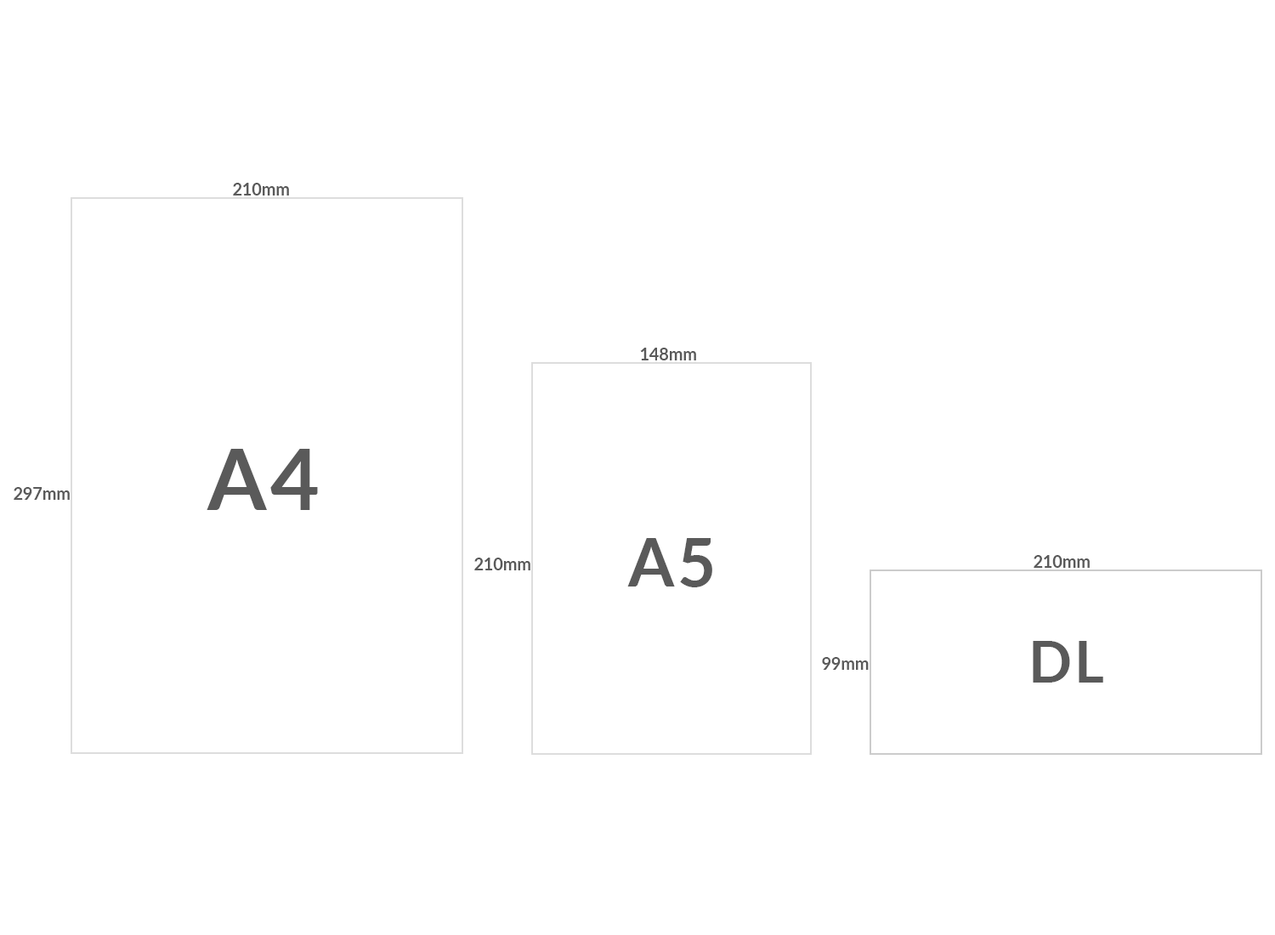
<style>
.page{position:relative;width:1275px;height:935px;background:#ffffff}
.page>*{position:absolute;margin:0}
.t1{font:17px "Lato-Bold";letter-spacing:-0.01em;color:#5a5a5a}
.t2{font:85.3px "Lato-Bold";letter-spacing:0.05em;color:#5a5a5a}
.t3{font:66.3px "Lato-Bold";letter-spacing:0.05em;color:#5a5a5a}
.t4{font:56.8px "Lato-Bold";letter-spacing:0.05em;color:#5a5a5a}
</style>
<div class="page">
<p class="t1" style="left:233px;top:183px;width:56px;height:13px">210mm</p>
<p class="t1" style="left:640px;top:348px;width:56px;height:12px">148mm</p>
<p class="t2" style="left:207px;top:449px;width:111px;height:61px">A4</p>
<p class="t1" style="left:14px;top:487px;width:56px;height:13px">297mm</p>
<p class="t3" style="left:627px;top:538px;width:85px;height:49px">A5</p>
<p class="t1" style="left:474px;top:558px;width:56px;height:12px">210mm</p>
<p class="t1" style="left:1034px;top:555px;width:56px;height:13px">210mm</p>
<p class="t4" style="left:1033px;top:641px;width:70px;height:42px">DL</p>
<p class="t1" style="left:822px;top:657px;width:47px;height:13px">99mm</p>
</div>
